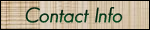
<style>
.page{position:relative;width:150px;height:30px}
.page>*{position:absolute;margin:0}
.t1{font:20px "GeosansLight-Oblique";color:#003516;font-weight:bold}
</style>
<div class="page">
<p class="t1" style="left:25px;top:7px;width:98px;height:16px">Contact Info</p>
</div>
